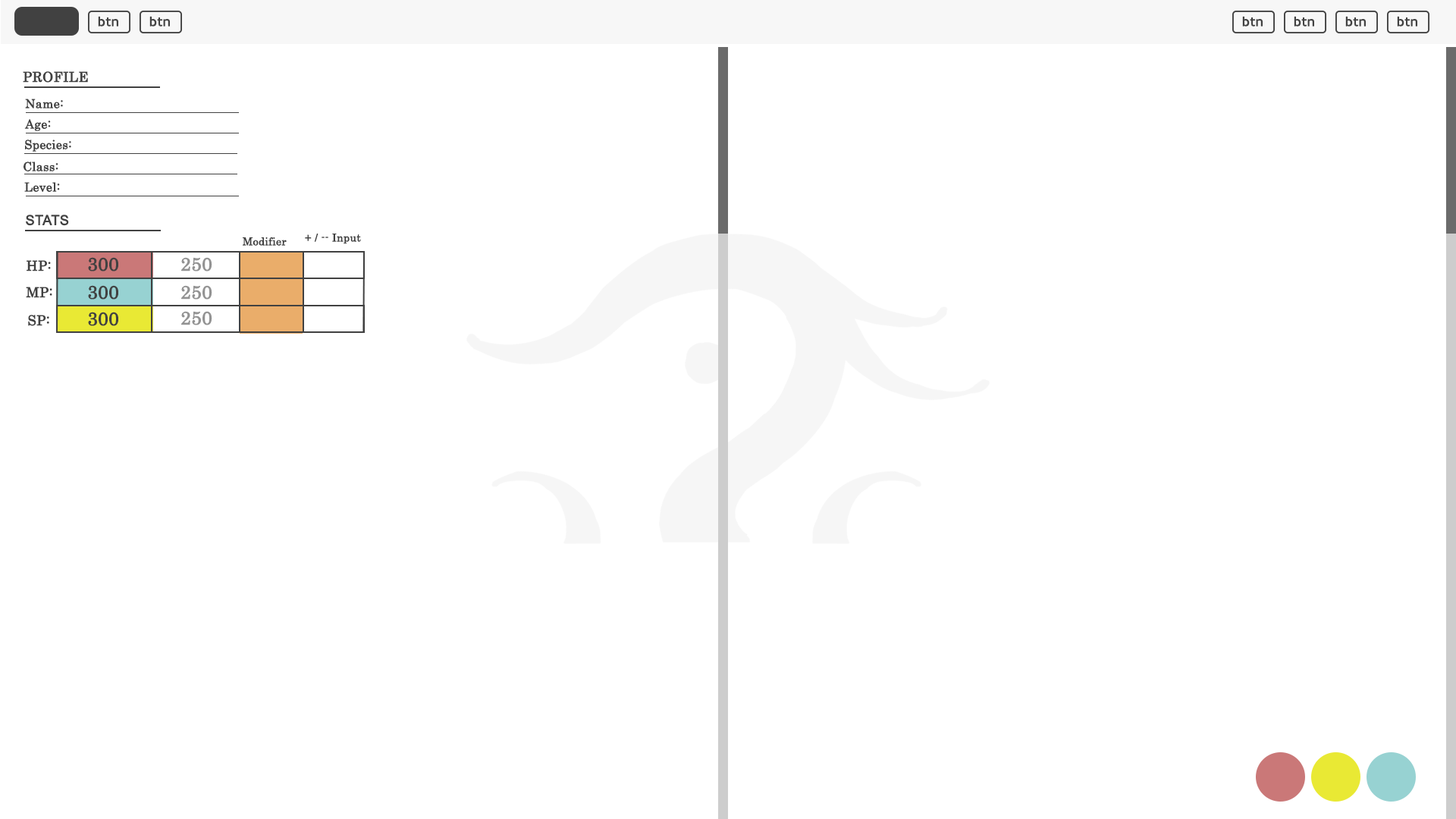
<style>
.page{position:relative;width:1456px;height:819px;background:#ffffff}
.page>*{position:absolute;margin:0}
.t1{font:13.6px "Cantarell-Regular";color:#414141;font-weight:bold}
.t2{font:13.6px "Century";color:#414141;font-weight:bold}
.t3{font:12.1px "Century";color:#414141;font-weight:bold}
.t4{font:13.6px "ArialMT";color:#414141;font-weight:bold}
.t5{font:10.6px "Century";color:#414141;font-weight:bold}
.t6{font:18.2px "Century";color:#414141;font-weight:bold}
.t7{font:18.2px "Century";color:#939393;font-weight:bold}
</style>
<div class="page">
<p class="t1" style="left:98px;top:16px;width:20px;height:11px">btn</p>
<p class="t1" style="left:149px;top:16px;width:21px;height:11px">btn</p>
<p class="t1" style="left:1242px;top:16px;width:21px;height:11px">btn</p>
<p class="t1" style="left:1294px;top:16px;width:20px;height:11px">btn</p>
<p class="t1" style="left:1345px;top:16px;width:21px;height:11px">btn</p>
<p class="t1" style="left:1397px;top:16px;width:20px;height:11px">btn</p>
<p class="t2" style="left:23px;top:71px;width:65px;height:12px">PROFILE</p>
<p class="t3" style="left:25px;top:99px;width:38px;height:9px">Name:</p>
<p class="t3" style="left:24px;top:119px;width:27px;height:12px">Age:</p>
<p class="t3" style="left:25px;top:140px;width:46px;height:12px">Species:<br><span class="t4">ttt</span></p>
<p class="t3" style="left:24px;top:162px;width:34px;height:9px">Class:</p>
<p class="t3" style="left:24px;top:182px;width:36px;height:10px">Level:</p>
<p class="t4" style="left:26px;top:215px;width:43px;height:11px">STATS</p>
<p class="t5" style="left:305px;top:234px;width:56px;height:10px">+ / -- Input</p>
<p class="t5" style="left:243px;top:237px;width:44px;height:9px">Modifier</p>
<p class="t6" style="left:88px;top:257px;width:30px;height:14px">300</p>
<p class="t7" style="left:181px;top:257px;width:31px;height:14px">250</p>
<p class="t2" style="left:27px;top:260px;width:24px;height:11px">HP:</p>
<p class="t2" style="left:26px;top:287px;width:26px;height:11px">MP:</p>
<p class="t6" style="left:88px;top:285px;width:30px;height:15px">300</p>
<p class="t7" style="left:181px;top:285px;width:31px;height:15px">250</p>
<p class="t2" style="left:28px;top:315px;width:21px;height:11px">SP:</p>
<p class="t6" style="left:88px;top:312px;width:30px;height:14px">300</p>
<p class="t7" style="left:181px;top:311px;width:31px;height:14px">250</p>
</div>
